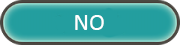
<style>
.page{position:relative;width:180px;height:45px;background:#239e9f}
.page>*{position:absolute;margin:0}
.t1{font:24px "Calibri";color:#ffffff}
</style>
<div class="page">
<p class="t1" style="left:75px;top:15px;width:29px;height:15px">NO</p>
</div>
